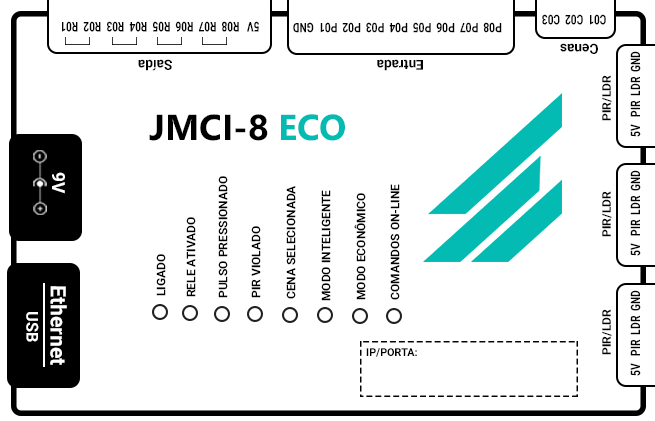
<style>
.page{position:relative;width:655px;height:421px;background:#ffffff}
.page>*{position:absolute;margin:0}
.t1{font:13.3px "Roboto-Bold";color:#000000;scale:0.76 1}
.t2{font:13.1px "Roboto-Bold";color:#000000;scale:0.78 1}
.t3{font:13.7px "Roboto-Bold";color:#000000}
.t4{font:12px "Roboto-Bold";color:#000000}
.t5{font:36px "SegoeUI-Bold";color:#000001}
.t6{font:36px "SegoeUI-Bold";color:#03bbb3}
.t7{font:18px "Roboto-Bold";color:#ffffff;scale:0.96 1}
.t8{font:21.3px "Roboto-Bold";color:#ffffff}
.t9{font:16.2px "Roboto-Bold";color:#ffffff}
.t10{font:10.8px "Roboto-Bold";color:#000000}
</style>
<div class="page">
<p class="t1" style="left:542px;top:14px;width:64px;height:11px;rotate:-180deg">C01  C02  C03</p>
<p class="t1" style="left:62px;top:21px;width:197px;height:11px;rotate:-180deg">5V   R08  R07  R06  R05  R04  R03  R02  R01</p>
<p class="t2" style="left:293px;top:22px;width:209px;height:11px;rotate:-180deg">P08  P07  P06  P05  P04  P03  P02  P01  GND</p>
<p class="t3" style="left:560px;top:43px;width:38px;height:11px;rotate:180deg">Cenas</p>
<p class="t2" style="left:630px;top:51px;width:11px;height:86px;rotate:-90deg">5V   PIR  LDR  GND</p>
<p class="t3" style="left:138px;top:59px;width:34px;height:12px;rotate:180deg">Saída</p>
<p class="t3" style="left:377px;top:59px;width:46px;height:12px;rotate:-180deg">Entrada</p>
<p class="t4" style="left:602px;top:75px;width:10px;height:46px;rotate:-90deg">PIR/LDR</p>
<p class="t5" style="left:149px;top:114px;width:119px;height:27px">JMCI-8</p>
<p class="t6" style="left:281px;top:114px;width:64px;height:27px">ECO</p>
<p class="t7" style="left:52px;top:172px;width:13px;height:22px;rotate:90deg">9V</p>
<p class="t2" style="left:630px;top:170px;width:11px;height:86px;rotate:-90deg">5V   PIR  LDR  GND</p>
<p class="t4" style="left:218px;top:176px;width:10px;height:122px;rotate:-90deg">PULSO PRESSIONADO</p>
<p class="t4" style="left:390px;top:184px;width:10px;height:116px;rotate:-90deg">COMANDOS ON-LINE</p>
<p class="t4" style="left:286px;top:186px;width:10px;height:113px;rotate:-90deg">CENA SELECIONADA</p>
<p class="t4" style="left:321px;top:190px;width:10px;height:111px;rotate:-90deg">MODO INTELIGENTE</p>
<p class="t4" style="left:354px;top:193px;width:12px;height:107px;rotate:-90deg">MODO ECONÔMICO</p>
<p class="t4" style="left:602px;top:191px;width:10px;height:46px;rotate:-90deg">PIR/LDR</p>
<p class="t4" style="left:186px;top:217px;width:10px;height:80px;rotate:-90deg">RELE ATIVADO</p>
<p class="t4" style="left:251px;top:226px;width:10px;height:72px;rotate:-90deg">PIR VIOLADO</p>
<p class="t4" style="left:156px;top:254px;width:10px;height:42px;rotate:-90deg">LIGADO</p>
<p class="t8" style="left:50px;top:286px;width:17px;height:79px;rotate:90deg">Ethernet</p>
<p class="t2" style="left:630px;top:290px;width:11px;height:86px;rotate:-90deg">5V   PIR  LDR  GND</p>
<p class="t9" style="left:26px;top:312px;width:13px;height:30px;rotate:90deg">USB</p>
<p class="t4" style="left:602px;top:309px;width:10px;height:46px;rotate:-90deg">PIR/LDR</p>
<p class="t10" style="left:366px;top:348px;width:51px;height:9px">IP/PORTA:</p>
</div>
